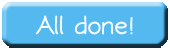
<style>
.page{position:relative;width:170px;height:50px;background:#53b9ef}
.page>*{position:absolute;margin:0}
.t1{font:24px "Bookworm";color:#f8fbfd;font-weight:bold}
</style>
<div class="page">
<p class="t1" style="left:35px;top:15px;width:98px;height:20px">All done!</p>
</div>
